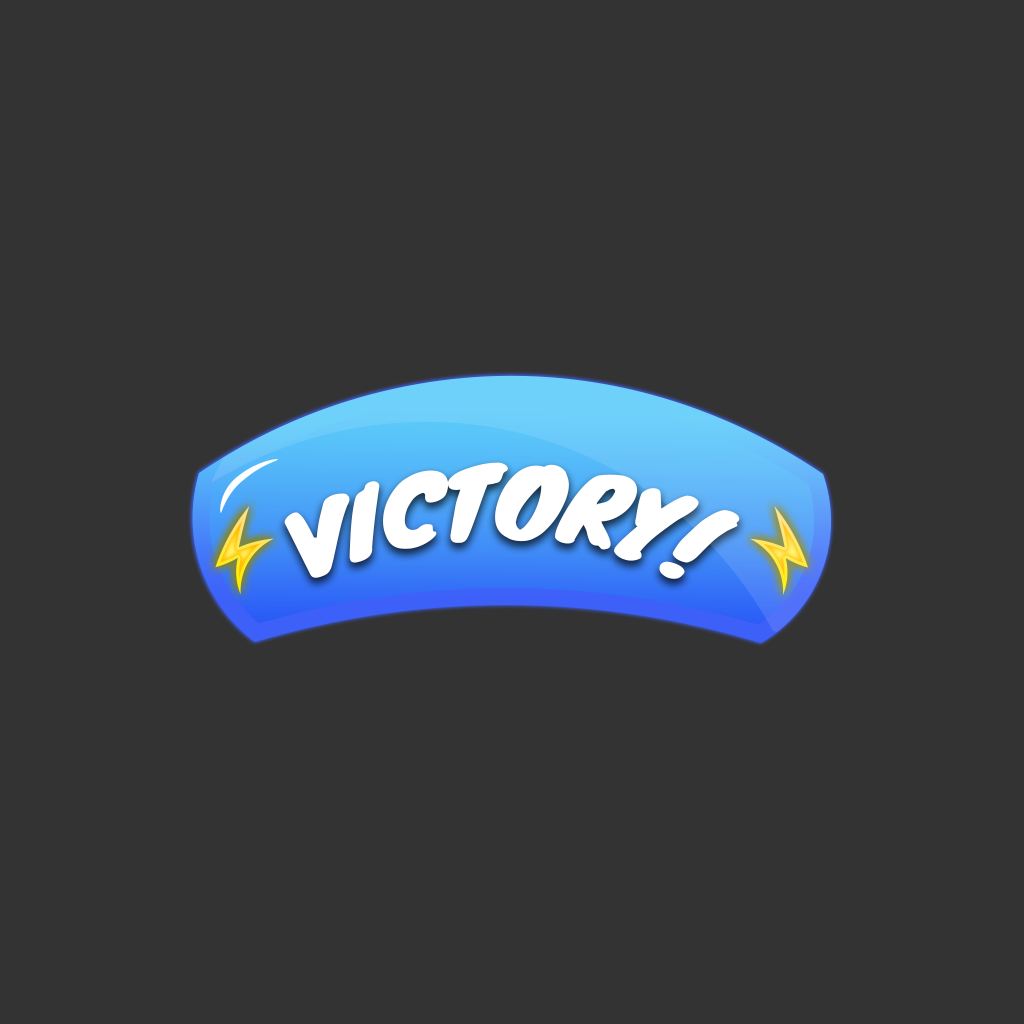
<style>
.page{position:relative;width:1024px;height:1024px;background:#333333}
.page>*{position:absolute;margin:0}
.t1{font:89.7px "Knewave-Regular";color:#ffffff}
</style>
<div class="page">
<p class="t1" style="left:284px;top:462px;width:456px;height:117px">VICTORY!</p>
</div>
